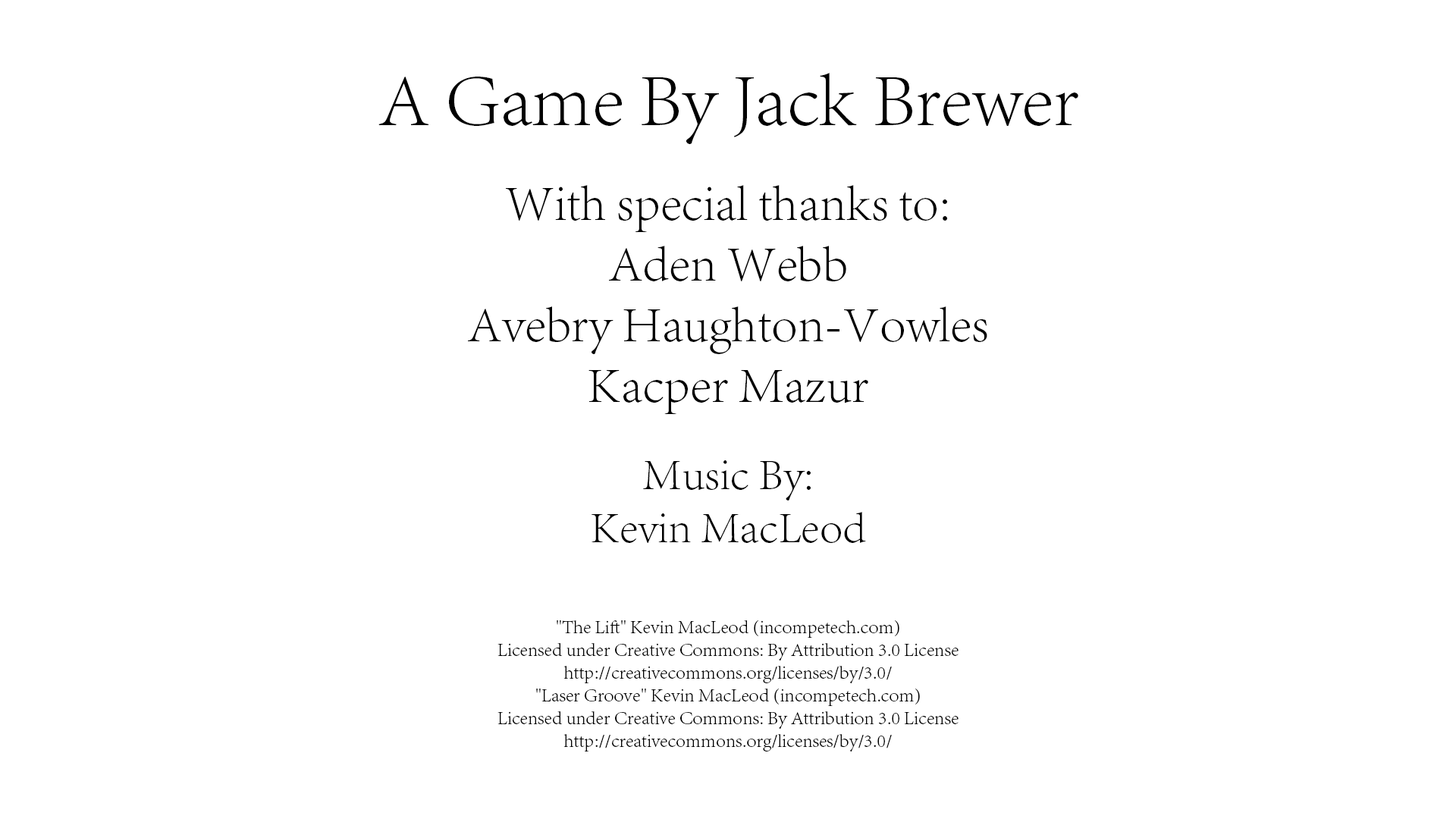
<style>
.page{position:relative;width:1456px;height:819px;background:#ffffff}
.page>*{position:absolute;margin:0}
.t1{font:19px "AdobeSongStd-Light";color:#000000}
.t2{font:75.8px "AdobeSongStd-Light";color:#000000}
.t3{font:50.6px "AdobeSongStd-Light";color:#000000}
.t4{font:44.2px "AdobeSongStd-Light";color:#000000}
</style>
<div class="page">
<p class="t1" style="left:378px;top:73px;width:700px;height:678px;text-align:center"><span class="t2">A Game By Jack Brewer<br><br></span><span class="t3">With special thanks to:<br>Aden Webb<br>Avebry Haughton-Vowles<br>Kacper Mazur<br><br></span><span class="t4">Music By:<br>Kevin MacLeod<br><br></span>"The Lift" Kevin MacLeod (incompetech.com)<br>Licensed under Creative Commons: By Attribution 3.0 License<br>http://creativecommons.org/licenses/by/3.0/<br>"Laser Groove" Kevin MacLeod (incompetech.com)<br>Licensed under Creative Commons: By Attribution 3.0 License<br>http://creativecommons.org/licenses/by/3.0/</p>
</div>
